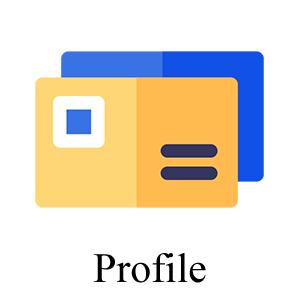
<style>
.page{position:relative;width:300px;height:300px;background:#ffffff}
.page>*{position:absolute;margin:0}
.t1{font:41.7px "TimesNewRomanPSMT";color:#000000}
</style>
<div class="page">
<p class="t1" style="left:93px;top:253px;width:113px;height:30px">Profile</p>
</div>
